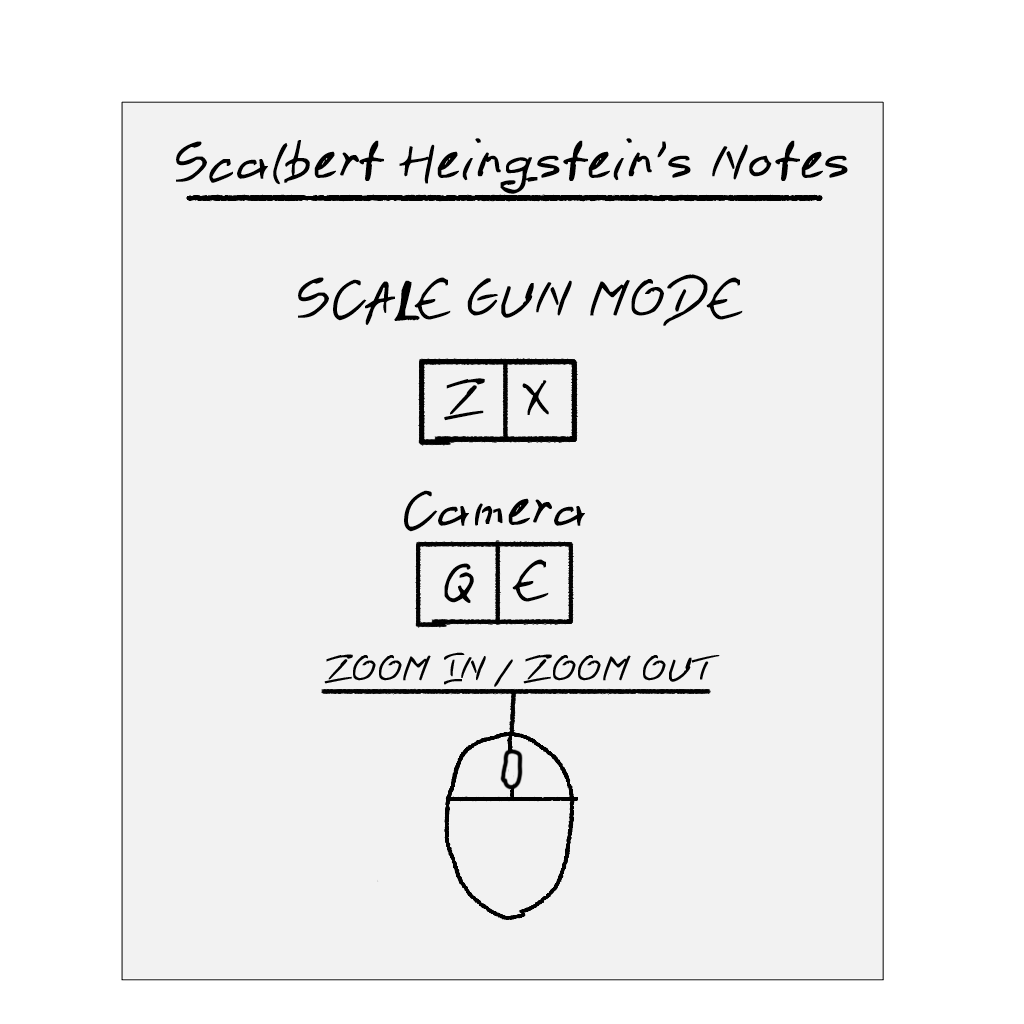
<style>
.page{position:relative;width:1024px;height:1024px;background:#f2f2f2}
.page>*{position:absolute;margin:0}
.t1{font:48px "pen2";color:#000000}
</style>
<div class="page">
<p class="t1" style="left:176px;top:138px;width:672px;height:56px">Scalbert Heingstein’s Notes</p>
<p class="t1" style="left:298px;top:274px;width:445px;height:52px">SCALE GUN MODE</p>
<p class="t1" style="left:444px;top:378px;width:41px;height:43px">Z</p>
<p class="t1" style="left:522px;top:380px;width:27px;height:35px">X</p>
<p class="t1" style="left:404px;top:490px;width:181px;height:42px">Camera</p>
<p class="t1" style="left:444px;top:563px;width:30px;height:40px">Q</p>
<p class="t1" style="left:512px;top:559px;width:37px;height:43px">E</p>
</div>
